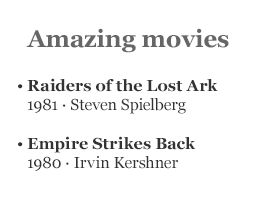
<style>
.page{position:relative;width:260px;height:200px;background:#ffffff}
.page>*{position:absolute;margin:0}
.t1{font:24px "Georgia-Bold";color:#666666}
.t2{font:16px "Georgia-Bold";color:#333333}
.t3{font:16px "Georgia";color:#333333}
</style>
<div class="page">
<p class="t1" style="left:26px;top:28px;width:203px;height:25px">Amazing movies</p>
<p class="t2" style="left:27px;top:78px;width:191px;height:93px">Raiders of the Lost Ark<br><span class="t3">1981 · Steven Spielberg<br><br></span>Empire Strikes Back<br><span class="t3">1980 · Irvin Kershner</span></p>
<p class="t3" style="left:18px;top:84px;width:5px;height:63px">•<br><br><br>•</p>
</div>
